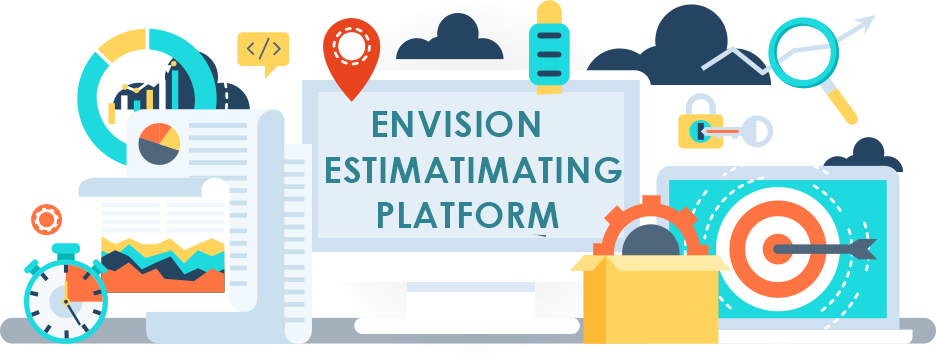
<style>
.page{position:relative;width:936px;height:358px;background:#ffffff}
.page>*{position:absolute;margin:0}
.t1{font:36px "CenturyGothic-Bold";letter-spacing:0.025em;color:#308390}
</style>
<div class="page">
<p class="t1" style="left:373px;top:111px;width:167px;height:26px">ENVISION</p>
<p class="t1" style="left:326px;top:157px;width:296px;height:26px">ESTIMATIMATING</p>
<p class="t1" style="left:378px;top:202px;width:181px;height:26px">PLATFORM</p>
</div>
